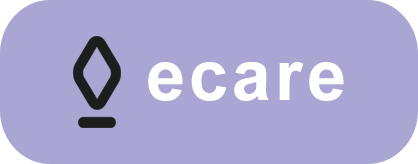
<style>
.page{position:relative;width:418px;height:164px;background:#a9a6d3}
.page>*{position:absolute;margin:0}
.t1{font:71.2px "Arial-BoldMT";letter-spacing:0.06em;color:#ffffff}
</style>
<div class="page">
<p class="t1" style="left:148px;top:62px;width:196px;height:39px">ecare</p>
</div>
